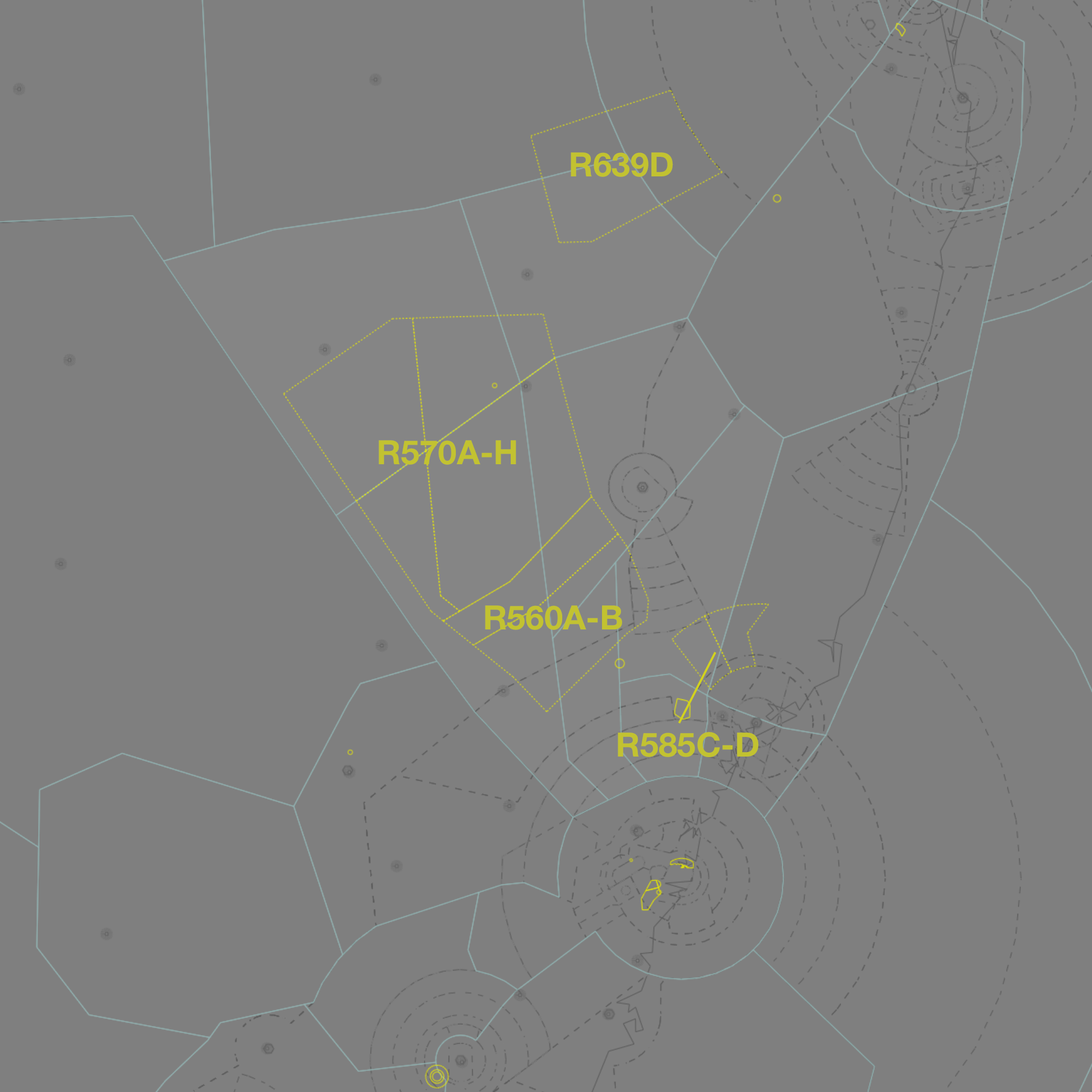
<style>
.page{position:relative;width:1092px;height:1092px;background:#7f7f7f}
.page>*{position:absolute;margin:0}
.t1{font:33.6px "HelveticaNeue-Bold";color:#c2c231}
</style>
<div class="page">
<p class="t1" style="left:571px;top:152px;width:102px;height:25px">R639D</p>
<p class="t1" style="left:379px;top:440px;width:137px;height:25px">R570A-H</p>
<p class="t1" style="left:485px;top:605px;width:137px;height:25px">R560A-B</p>
<p class="t1" style="left:618px;top:732px;width:141px;height:25px">R585C-D</p>
</div>
